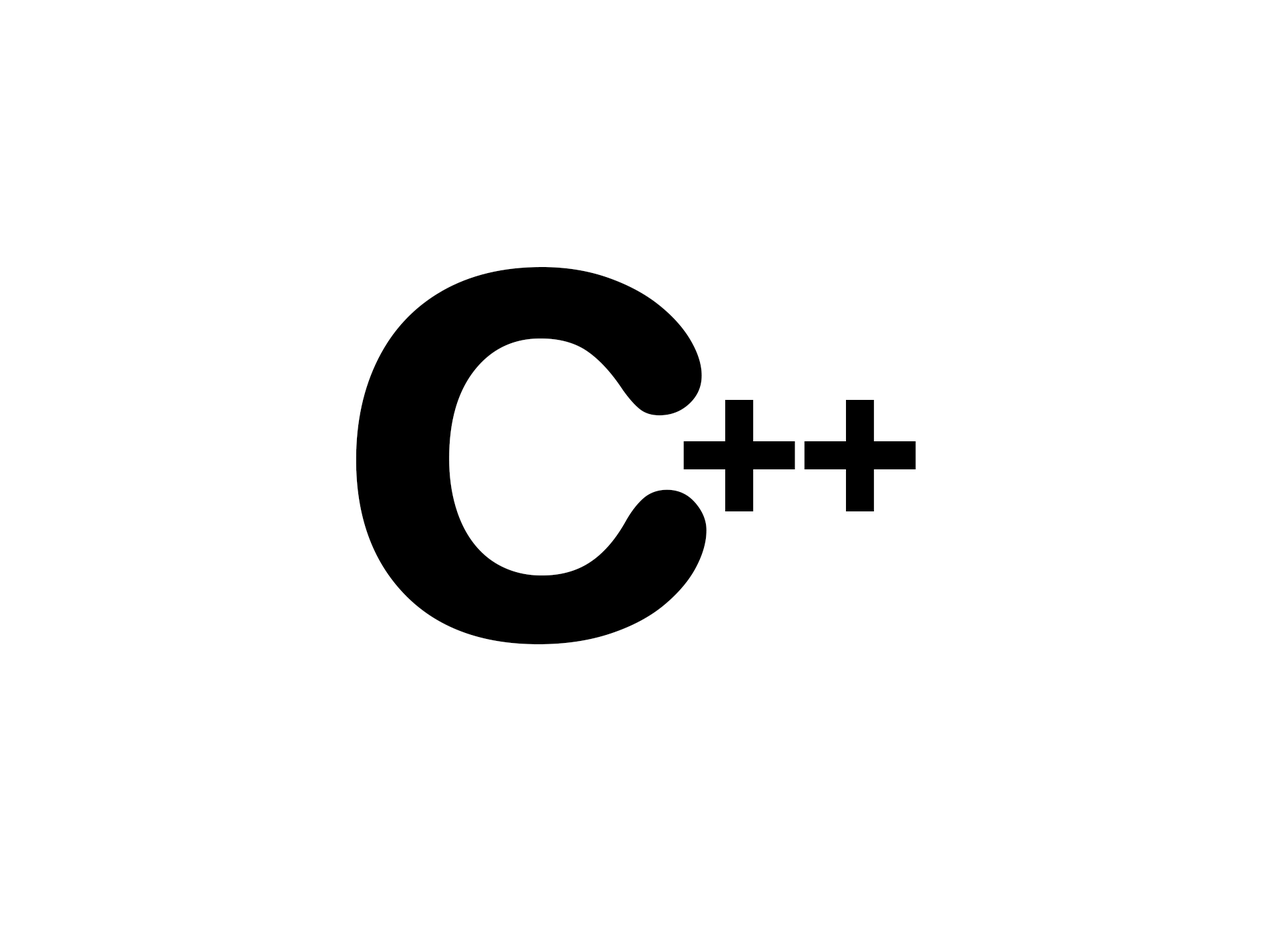
<style>
.page{position:relative;width:1261px;height:946px;background:#ffffff}
.page>*{position:absolute;margin:0}
.t1{font:695.1px "ArialRoundedMTBold";color:#000000}
.t2{font:222.4px "ArialRoundedMTBold";color:#000000}
</style>
<div class="page">
<p class="t1" style="left:356px;top:267px;width:351px;height:377px">c</p>
<p class="t2" style="left:683px;top:400px;width:112px;height:111px">+</p>
<p class="t2" style="left:804px;top:400px;width:112px;height:111px">+</p>
</div>
